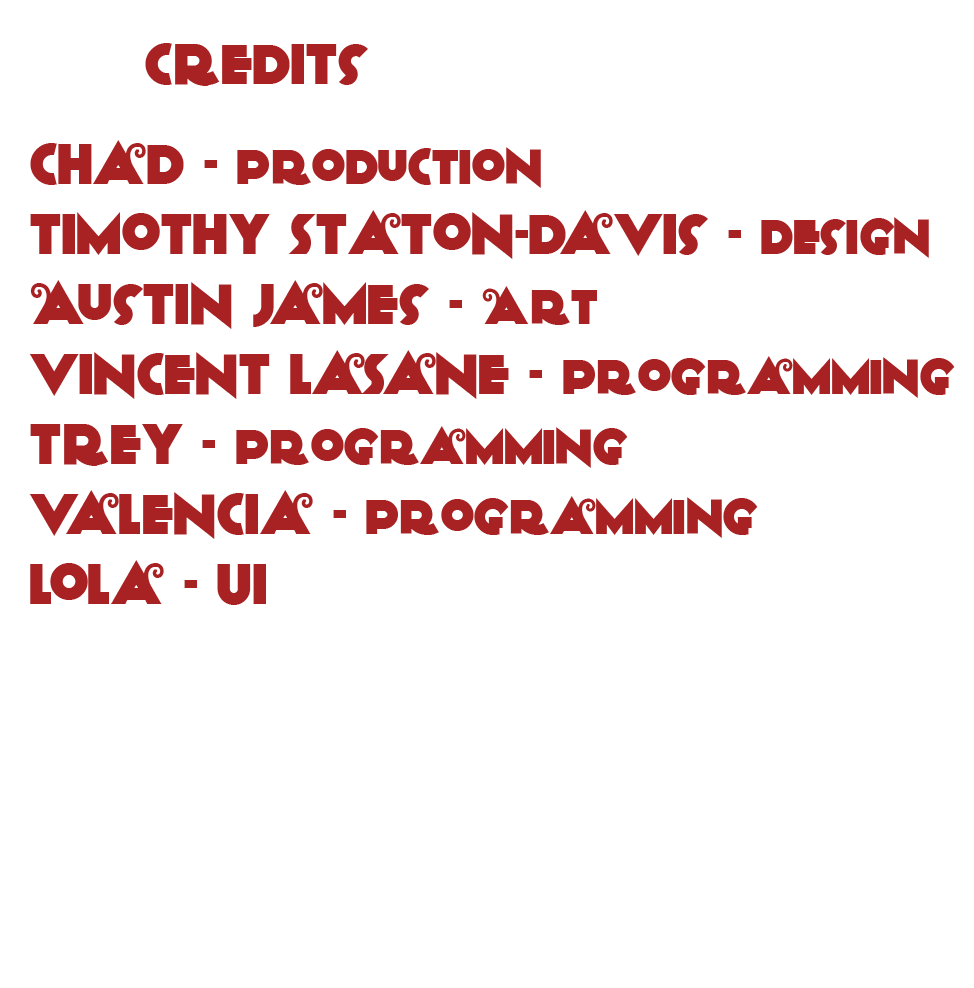
<style>
.page{position:relative;width:974px;height:988px;background:#ffffff}
.page>*{position:absolute;margin:0}
.t1{font:58.3px "Anagram";color:#a82224}
.t2{font:50px "Anagram";color:#a82224}
.t3{font:58.3px "Anagram";letter-spacing:-0.5em;color:#a82224}
</style>
<div class="page">
<p class="t1" style="left:145px;top:43px;width:223px;height:43px">Credits</p>
<p class="t1" style="left:29px;top:140px;width:926px;height:465px">Chad - <span class="t2">Production<br></span>Timothy Staton-Davis - <span class="t2">Design<br></span>Austin James - <span class="t2">Art<br></span>Vincent LaSane - <span class="t2">Programming<br></span>Trey - <span class="t2">Programming<br></span><span class="t3">V</span>alencia - <span class="t2">Programming<br></span>Lola - UI</p>
</div>
